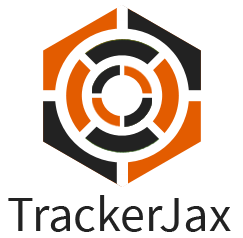
<style>
.page{position:relative;width:243px;height:238px;background:#ffffff}
.page>*{position:absolute;margin:0}
.t1{font:50px "SourceSansPro-Regular";color:#222222}
</style>
<div class="page">
<p class="t1" style="left:8px;top:195px;width:223px;height:37px">TrackerJax</p>
</div>
